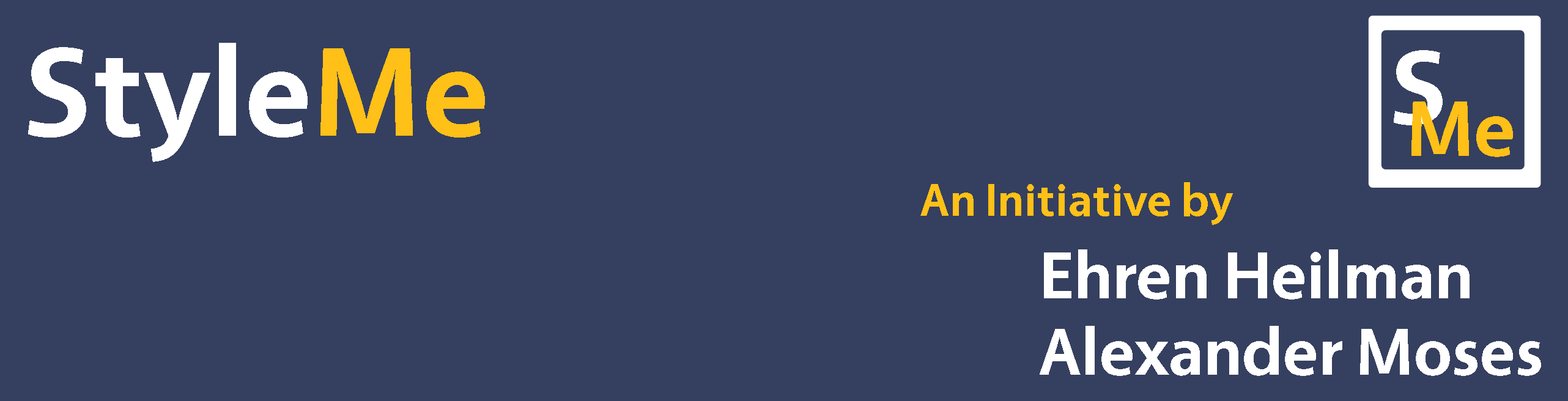
<style>
.page{position:relative;width:1568px;height:401px;background:#353f5f}
.page>*{position:absolute;margin:0}
.t1{font:129px "Vegur-Bold";color:#ffffff}
.t2{font:129px "Vegur-Bold";color:#ffc017}
.t3{font:107.4px "Vegur-Bold";color:#ffffff}
.t4{font:80.1px "Vegur-Bold";color:#ffc017}
.t5{font:46.7px "Vegur-Bold";color:#ffc017}
.t6{font:67.7px "Vegur-Bold";color:#ffffff}
</style>
<div class="page">
<p class="t1" style="left:28px;top:43px;width:457px;height:119px">Style<span class="t2">Me</span></p>
<p class="t3" style="left:1394px;top:50px;width:49px;height:75px">S</p>
<p class="t4" style="left:1411px;top:102px;width:102px;height:55px">Me</p>
<p class="t5" style="left:920px;top:182px;width:313px;height:43px">An Initiative by</p>
<p class="t6" style="left:1044px;top:250px;width:426px;height:50px">Ehren Heilman</p>
<p class="t6" style="left:1040px;top:326px;width:501px;height:50px">Alexander Moses</p>
</div>
